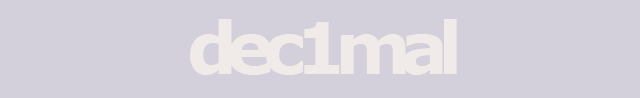
<style>
.page{position:relative;width:640px;height:98px;background:#d4d0db}
.page>*{position:absolute;margin:0}
.t1{font:72px "Verdana-Bold";letter-spacing:-0.15em;color:#f0ebe8}
</style>
<div class="page">
<p class="t1" style="left:190px;top:19px;width:267px;height:56px">dec1mal</p>
</div>
